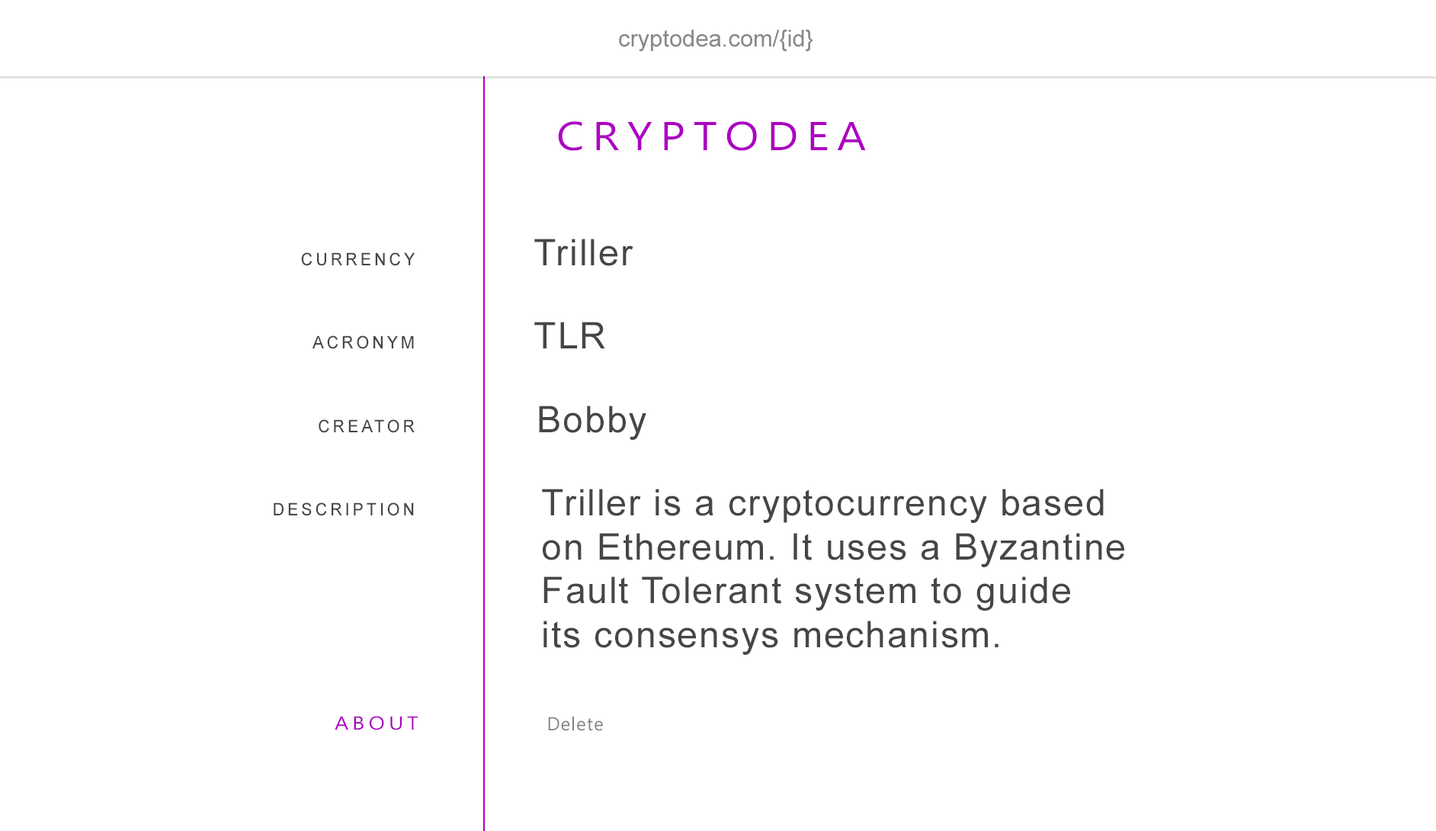
<style>
.page{position:relative;width:1436px;height:831px;background:#ffffff}
.page>*{position:absolute;margin:0}
.t1{font:23.2px "ArialMT";color:#888888}
.t2{font:40.4px "Ebrima";letter-spacing:0.18em;color:#ad00c2;scale:1.11 1}
.t3{font:36.6px "ArialMT";letter-spacing:0.04em;color:#464646}
.t4{font:17.4px "ArialMT";letter-spacing:0.18em;color:#464646;scale:0.95 1}
.t5{font:18.9px "Ebrima";letter-spacing:0.18em;color:#ad00c2;scale:1.14 1}
.t6{font:18.6px "Ebrima";letter-spacing:0.04em;color:#828282}
</style>
<div class="page">
<p class="t1" style="left:619px;top:29px;width:193px;height:23px">cryptodea.com/{id}</p>
<p class="t2" style="left:558px;top:121px;width:308px;height:30px">CRYPTODEA</p>
<p class="t3" style="left:534px;top:239px;width:99px;height:27px">Triller</p>
<p class="t4" style="left:274px;top:252px;width:141px;height:264px;text-align:right">CURRENCY<br><br><br><br>ACRONYM<br><br><br><br>CREATOR<br><br><br><br>DESCRIPTION</p>
<p class="t3" style="left:534px;top:322px;width:71px;height:26px">TLR</p>
<p class="t3" style="left:539px;top:405px;width:107px;height:35px">Bobby</p>
<p class="t3" style="left:542px;top:488px;width:582px;height:167px">Triller is a cryptocurrency based<br>on Ethereum. It uses a Byzantine <br>Fault Tolerant system to guide<br>its consensys mechanism.</p>
<p class="t5" style="left:335px;top:716px;width:83px;height:14px">ABOUT</p>
<p class="t6" style="left:548px;top:716px;width:55px;height:15px">Delete</p>
</div>
